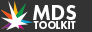
<style>
.page{position:relative;width:92px;height:32px;background:#333333}
.page>*{position:absolute;margin:0}
.t1{font:21.1px "FuturaPT-Heavy";color:#ffffff}
.t2{font:10.6px "FuturaPT-Heavy";color:#ffffff}
</style>
<div class="page">
<p class="t1" style="left:33px;top:5px;width:43px;height:15px">MDS</p>
<p class="t2" style="left:33px;top:21px;width:43px;height:8px">TOOLKIT</p>
</div>
